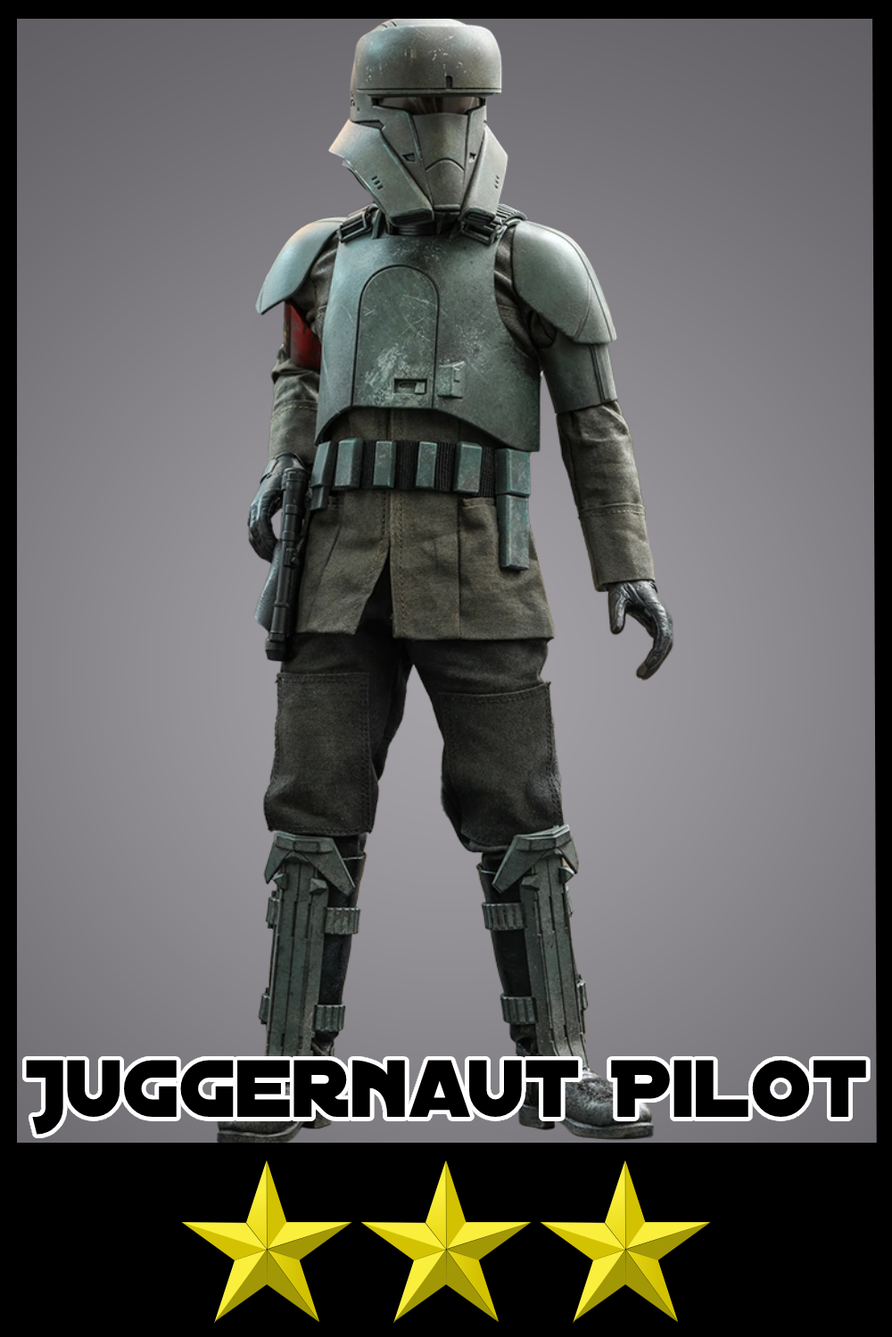
<style>
.page{position:relative;width:892px;height:1337px}
.page>*{position:absolute;margin:0}
.t1{font:87.1px "DistantGalaxy";color:#000000}
</style>
<div class="page">
<p class="t1" style="left:26px;top:1060px;width:840px;height:75px">Juggernaut Pilot</p>
</div>
